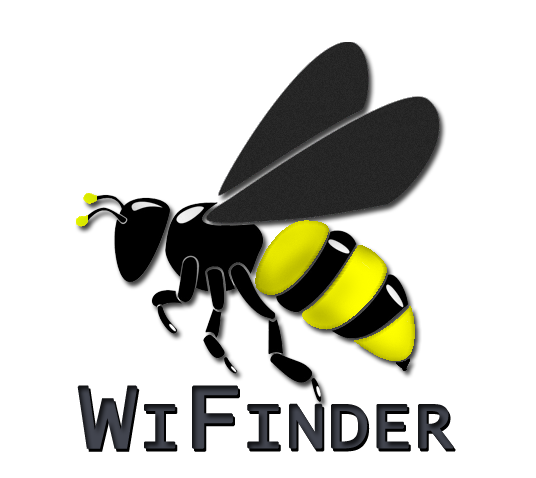
<style>
.page{position:relative;width:536px;height:478px;background:#ffffff}
.page>*{position:absolute;margin:0}
.t1{font:96.7px "LucidaConsole";color:#42454f;font-variant:small-caps;font-weight:bold}
</style>
<div class="page">
<p class="t1" style="left:77px;top:385px;width:377px;height:64px">WiFinder</p>
</div>
